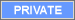
<style>
.page{position:relative;width:75px;height:20px;background:#6699ff}
.page>*{position:absolute;margin:0}
.t1{font:11.7px "Arial-BoldMT";color:#ffffff}
</style>
<div class="page">
<p class="t1" style="left:14px;top:5px;width:48px;height:10px">PRIVATE</p>
</div>
